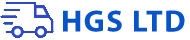
<style>
.page{position:relative;width:190px;height:40px;background:#ffffff}
.page>*{position:absolute;margin:0}
.t1{font:30.7px "MyriadPro-Bold";letter-spacing:0.05em;color:#0654c8}
</style>
<div class="page">
<p class="t1" style="left:63px;top:10px;width:122px;height:22px">HGS LTD</p>
</div>
